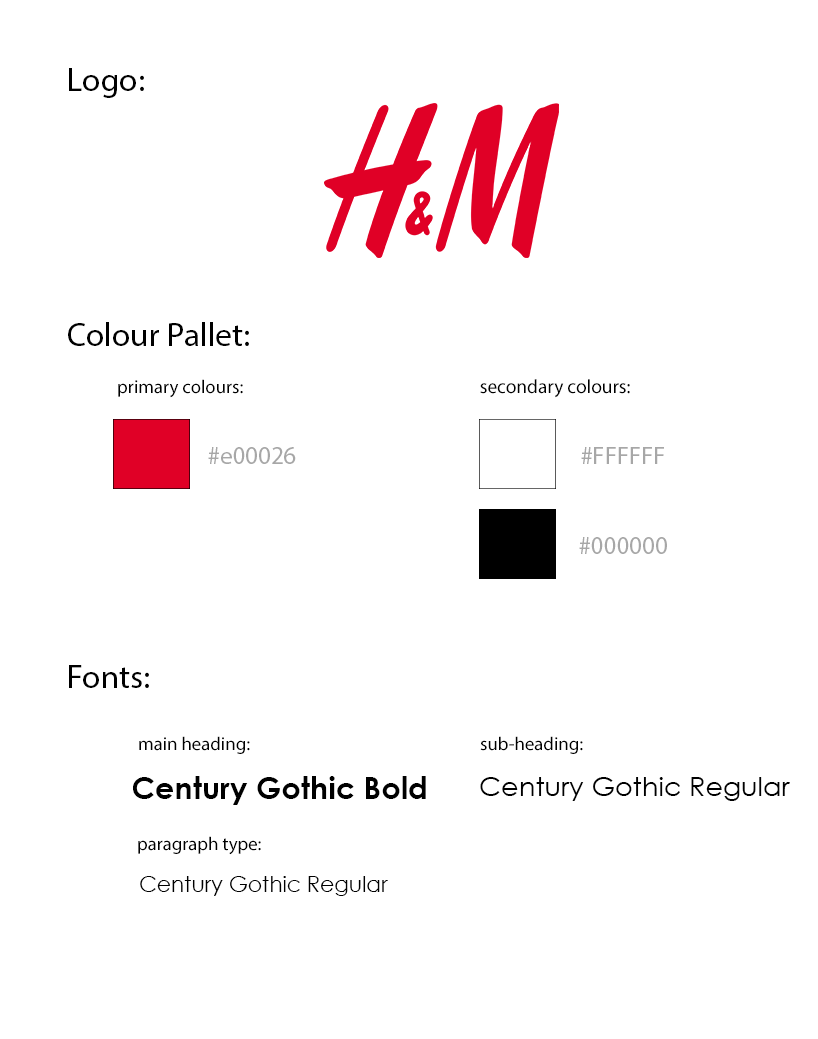
<style>
.page{position:relative;width:818px;height:1039px;background:#ffffff}
.page>*{position:absolute;margin:0}
.t1{font:33.3px "MyriadPro-Regular";color:#000000}
.t2{font:18.7px "MyriadPro-Regular";color:#000000}
.t3{font:19.4px "MyriadPro-Regular";color:#000000}
.t4{font:25px "MyriadPro-Regular";color:#a7a7a7}
.t5{font:30.4px "CenturyGothic-Bold";color:#000000}
.t6{font:27.1px "CenturyGothic";color:#000000}
.t7{font:22px "CenturyGothic";color:#000000}
</style>
<div class="page">
<p class="t1" style="left:69px;top:68px;width:75px;height:30px">Logo:</p>
<p class="t1" style="left:68px;top:322px;width:181px;height:24px">Colour Pallet:</p>
<p class="t2" style="left:118px;top:379px;width:125px;height:19px">primary colours:</p>
<p class="t3" style="left:480px;top:379px;width:150px;height:19px">secondary colours:</p>
<p class="t4" style="left:208px;top:447px;width:88px;height:17px">#e00026</p>
<p class="t4" style="left:581px;top:447px;width:83px;height:17px">#FFFFFF</p>
<p class="t4" style="left:579px;top:537px;width:88px;height:17px">#000000</p>
<p class="t1" style="left:69px;top:665px;width:80px;height:23px">Fonts:</p>
<p class="t2" style="left:139px;top:736px;width:111px;height:18px">main heading:</p>
<p class="t2" style="left:480px;top:736px;width:103px;height:18px">sub-heading:</p>
<p class="t5" style="left:133px;top:776px;width:293px;height:29px">Century Gothic Bold</p>
<p class="t6" style="left:480px;top:777px;width:310px;height:24px">Century Gothic Regular</p>
<p class="t2" style="left:138px;top:836px;width:123px;height:19px">paragraph type:</p>
<p class="t7" style="left:140px;top:876px;width:248px;height:20px">Century Gothic Regular</p>
</div>
